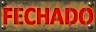
<style>
.page{position:relative;width:96px;height:32px}
.page>*{position:absolute;margin:0}
.t1{font:25.3px "Calibri-Bold";letter-spacing:-0.02em;font-weight:bold;scale:0.89 1}
</style>
<div class="page">
<p class="t1" style="left:3px;top:7px;width:90px;height:18px">FECHADO</p>
</div>
